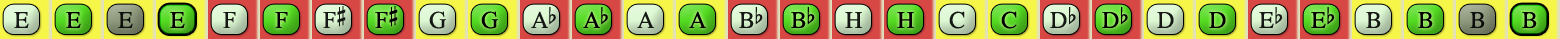
<style>
.page{position:relative;width:1560px;height:39px}
.page>*{position:absolute;margin:0}
.t1{font:24px "OpusChords";color:#000000}
.t2{font:24px "OpusChords";letter-spacing:-0.05em;color:#000000}
</style>
<div class="page">
<p class="t1" style="left:323px;top:6px;width:23px;height:22px;opacity:0.9">F#</p>
<p class="t1" style="left:375px;top:6px;width:23px;height:22px">F#</p>
<p class="t1" style="left:14px;top:12px;width:15px;height:16px;opacity:0.9">E</p>
<p class="t1" style="left:66px;top:12px;width:15px;height:16px">E</p>
<p class="t1" style="left:118px;top:12px;width:15px;height:16px;opacity:0.9">E</p>
<p class="t1" style="left:170px;top:12px;width:15px;height:16px">E</p>
<p class="t1" style="left:223px;top:12px;width:13px;height:16px;opacity:0.9">F</p>
<p class="t1" style="left:275px;top:12px;width:13px;height:16px">F</p>
<p class="t1" style="left:429px;top:11px;width:17px;height:18px;opacity:0.9">G</p>
<p class="t1" style="left:481px;top:11px;width:17px;height:18px">G</p>
<p class="t2" style="left:531px;top:7px;width:25px;height:21px;opacity:0.9">Ab</p>
<p class="t2" style="left:583px;top:7px;width:25px;height:21px">Ab</p>
<p class="t1" style="left:637px;top:11px;width:17px;height:17px;opacity:0.9">A</p>
<p class="t1" style="left:689px;top:11px;width:17px;height:17px">A</p>
<p class="t1" style="left:739px;top:7px;width:24px;height:21px;opacity:0.9">Bb</p>
<p class="t1" style="left:791px;top:7px;width:24px;height:21px">Bb</p>
<p class="t1" style="left:845px;top:12px;width:17px;height:16px;opacity:0.9">H</p>
<p class="t1" style="left:897px;top:12px;width:17px;height:16px">H</p>
<p class="t1" style="left:949px;top:11px;width:16px;height:18px;opacity:0.9">C</p>
<p class="t1" style="left:1001px;top:11px;width:16px;height:18px">C</p>
<p class="t1" style="left:1050px;top:7px;width:26px;height:21px;opacity:0.9">Db</p>
<p class="t1" style="left:1102px;top:7px;width:26px;height:21px">Db</p>
<p class="t1" style="left:1157px;top:12px;width:17px;height:16px;opacity:0.9">D</p>
<p class="t1" style="left:1209px;top:12px;width:17px;height:16px">D</p>
<p class="t1" style="left:1259px;top:7px;width:24px;height:21px;opacity:0.9">Eb</p>
<p class="t1" style="left:1311px;top:7px;width:24px;height:21px">Eb</p>
<p class="t1" style="left:1366px;top:12px;width:15px;height:16px;opacity:0.9">B</p>
<p class="t1" style="left:1418px;top:12px;width:15px;height:16px">B</p>
<p class="t1" style="left:1470px;top:12px;width:15px;height:16px;opacity:0.9">B</p>
<p class="t1" style="left:1522px;top:12px;width:15px;height:16px">B</p>
</div>
